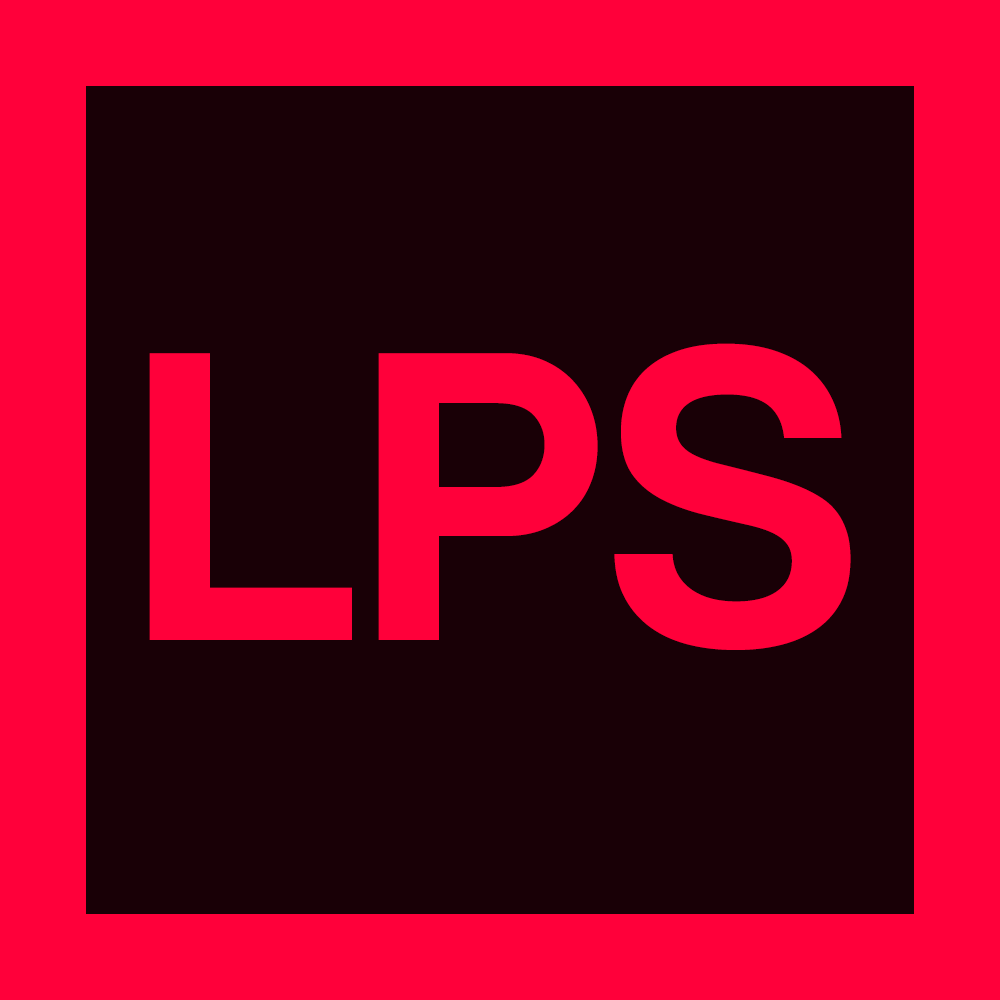
<style>
.page{position:relative;width:1000px;height:1000px;background:#190006}
.page>*{position:absolute;margin:0}
.t1{font:431.7px "CoolveticaRg-Regular";letter-spacing:0.03em;color:#ff003a}
</style>
<div class="page">
<p class="t1" style="left:149px;top:343px;width:702px;height:307px">LPS</p>
</div>
